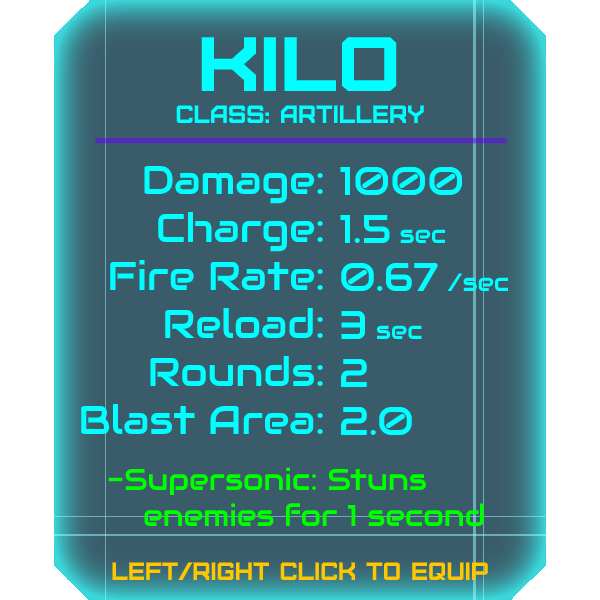
<style>
.page{position:relative;width:600px;height:600px;background:#3a5c6a}
.page>*{position:absolute;margin:0}
.t1{font:76.8px "Furore";color:#00ffff;scale:1.13 1}
.t2{font:25px "Furore";color:#00ffff}
.t3{font:40px "Audiowide-Regular";color:#00ffff}
.t4{font:25px "Audiowide-Regular";color:#00ffff}
.t5{font:30px "Audiowide-Regular";color:#00ff00}
.t6{font:40px "Audiowide-Regular";color:#00ff00}
.t7{font:25px "Furore";color:#ffc700}
</style>
<div class="page">
<p class="t1" style="left:201px;top:37px;width:196px;height:54px">KILO</p>
<p class="t2" style="left:176px;top:105px;width:248px;height:18px">Class: artillery</p>
<p class="t3" style="left:81px;top:165px;width:242px;height:269px;text-align:right">Damage:<br>Charge:<br>Fire Rate:<br>Reload:<br>Rounds:<br>Blast Area:</p>
<p class="t3" style="left:340px;top:166px;width:169px;height:269px">1000<br>1.5 <span class="t4">sec<br></span>0.67 <span class="t4">/sec<br></span>3 <span class="t4">sec<br></span>2<br>2.0</p>
<p class="t5" style="left:108px;top:467px;width:376px;height:59px"><span class="t6"><br><br><br><br><br><br></span>-Supersonic: Stuns<br> enemies for 1 second</p>
<p class="t7" style="left:112px;top:562px;width:376px;height:18px">left/right click to equip</p>
</div>
